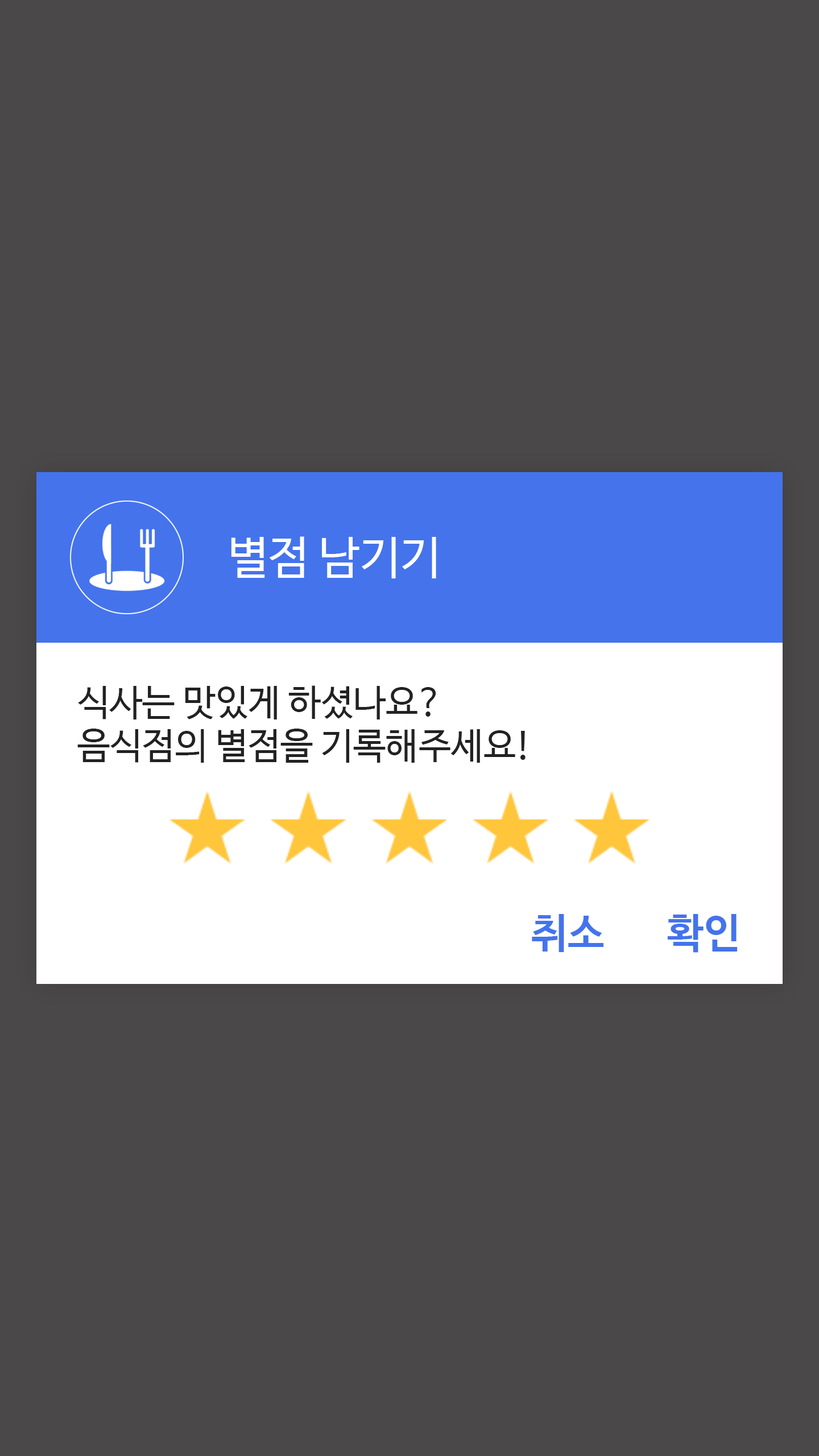
<style>
.page{position:relative;width:819px;height:1456px;background:#4a4848}
.page>*{position:absolute;margin:0}
.t1{font:45.5px "NanumBarunGothic";color:#ffffff}
.t2{font:36.4px "NanumBarunGothic";color:#222222}
.t3{font:40.9px "NanumBarunGothicBold";color:#4473ec}
</style>
<div class="page">
<p class="t1" style="left:231px;top:536px;width:205px;height:42px">별점 남기기</p>
<p class="t2" style="left:77px;top:685px;width:449px;height:78px">식사는 맛있게 하셨나요?<br>음식점의 별점을 기록해주세요!</p>
<p class="t3" style="left:532px;top:914px;width:71px;height:38px">취소</p>
<p class="t3" style="left:667px;top:914px;width:71px;height:39px">확인</p>
</div>
